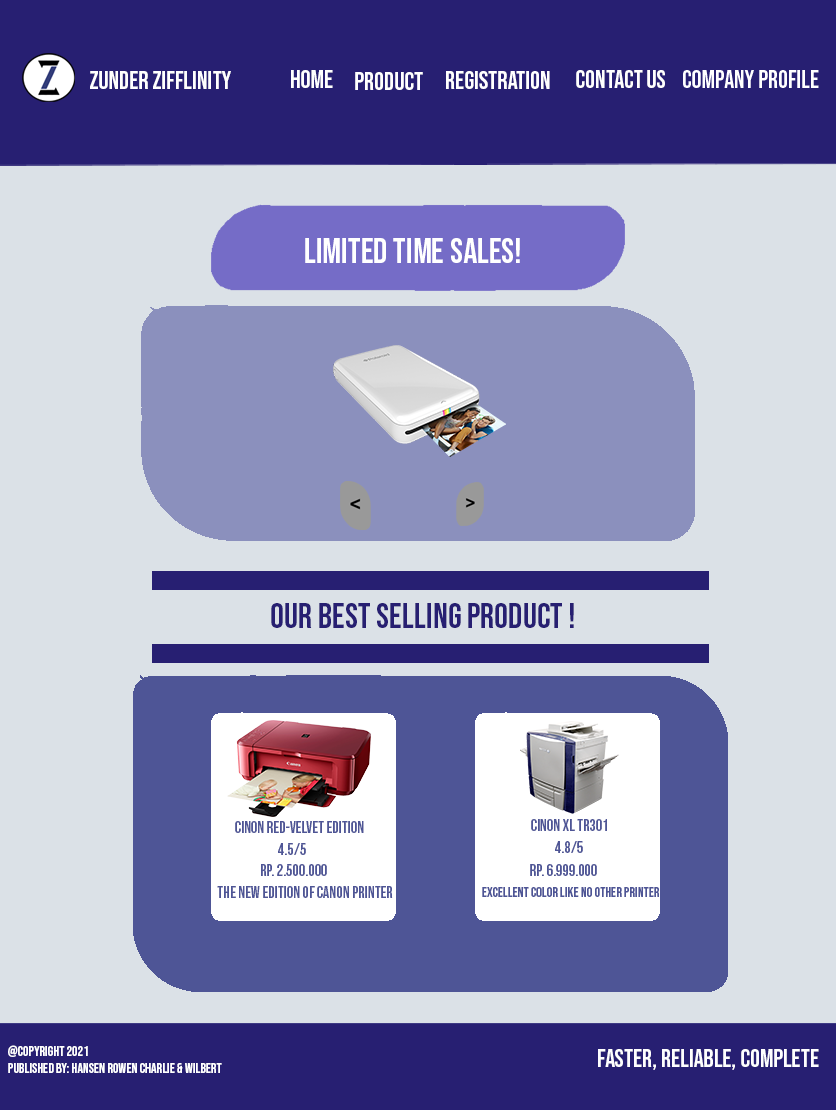
<style>
.page{position:relative;width:836px;height:1110px;background:#dbe1e7}
.page>*{position:absolute;margin:0}
.t1{font:25px "BebasNeue-Regular";color:#ffffff}
.t2{font:35px "BebasNeue-Regular";color:#ffffff}
.t3{font:35px "BebasNeue-Regular";color:#271f72}
.t4{font:16px "BebasNeue-Regular";color:#4e5596}
.t5{font:14px "BebasNeue-Regular";color:#4e5596}
.t6{font:14px "BebasNeue-Regular";color:#fefeff}
.t7{font:25px "BebasNeue-Regular";color:#fefeff}
</style>
<div class="page">
<p class="t1" style="left:90px;top:71px;width:141px;height:18px">ZUNDER ZIFFLINITY</p>
<p class="t1" style="left:291px;top:70px;width:42px;height:18px">Home</p>
<p class="t1" style="left:355px;top:72px;width:68px;height:18px">Product</p>
<p class="t1" style="left:446px;top:71px;width:104px;height:18px">Registration</p>
<p class="t1" style="left:576px;top:70px;width:89px;height:18px">Contact US</p>
<p class="t2" style="left:305px;top:238px;width:215px;height:25px">LIMITED TIME SALES!</p>
<p class="t3" style="left:271px;top:603px;width:303px;height:25px">OUR BEST SELLING PRODUCT !</p>
<p class="t4" style="left:235px;top:821px;width:129px;height:12px">Cinon Red-Velvet Edition</p>
<p class="t4" style="left:531px;top:819px;width:76px;height:12px">Cinon XL TR301</p>
<p class="t4" style="left:278px;top:843px;width:28px;height:12px">4.5/5</p>
<p class="t4" style="left:555px;top:841px;width:28px;height:12px">4.8/5</p>
<p class="t4" style="left:261px;top:864px;width:66px;height:12px">Rp. 2.500.000</p>
<p class="t4" style="left:530px;top:864px;width:67px;height:12px">Rp. 6.999.000</p>
<p class="t4" style="left:217px;top:886px;width:176px;height:12px">the new edition of canon printer</p>
<p class="t5" style="left:482px;top:887px;width:183px;height:10px">Excellent color like no other printers</p>
<p class="t6" style="left:8px;top:1045px;width:214px;height:28px">@copyright 2021<br>published by: Hansen rowen charlie &amp; wilbert</p>
<p class="t7" style="left:598px;top:1049px;width:221px;height:21px">FASTER, Reliable, complete</p>
</div>
